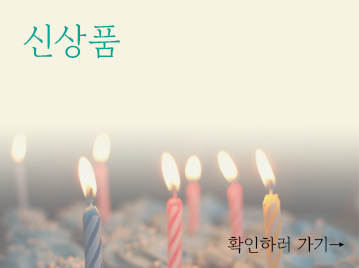
<style>
.page{position:relative;width:359px;height:268px;background:#f6f3e2}
.page>*{position:absolute;margin:0}
.t1{font:36.2px "GowunBatang-Regular";color:#01a695}
.t2{font:18.1px "GowunBatang-Regular";color:#010101}
</style>
<div class="page">
<p class="t1" style="left:23px;top:23px;width:97px;height:36px">신상품</p>
<p class="t2" style="left:227px;top:236px;width:118px;height:18px">확인하러 가기→</p>
</div>
